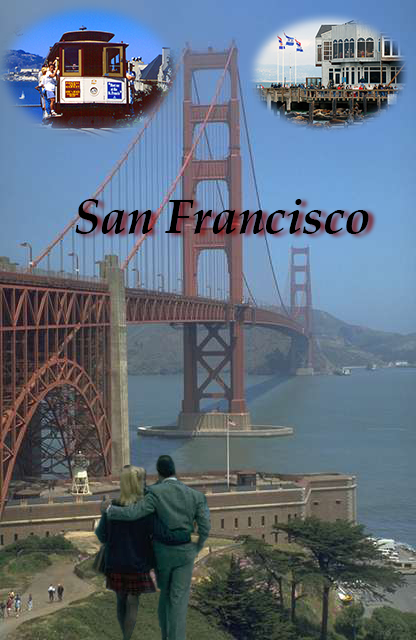
<style>
.page{position:relative;width:416px;height:640px}
.page>*{position:absolute;margin:0}
.t1{font:48px "BookAntiqua-BoldItalic";color:#000000}
</style>
<div class="page">
<p class="t1" style="left:75px;top:199px;width:294px;height:35px">San Francisco</p>
</div>
